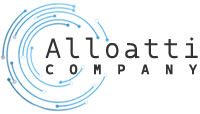
<style>
.page{position:relative;width:200px;height:114px;background:#ffffff}
.page>*{position:absolute;margin:0}
.t1{font:26.7px "CascadiaCode-ExtraLight";letter-spacing:0.14em;color:#333333;font-weight:bold}
.t2{font:13.3px "CascadiaMonoPL-Regular";letter-spacing:1.18em;color:#333333;font-weight:bold}
</style>
<div class="page">
<p class="t1" style="left:45px;top:37px;width:153px;height:22px">Alloatti</p>
<p class="t2" style="left:46px;top:64px;width:151px;height:11px">COMPANY</p>
</div>
